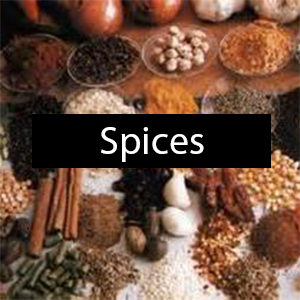
<style>
.page{position:relative;width:300px;height:300px}
.page>*{position:absolute;margin:0}
.t1{font:40px "MyriadPro-Regular";color:#ffffff}
</style>
<div class="page">
<p class="t1" style="left:101px;top:127px;width:103px;height:35px">Spices</p>
</div>
